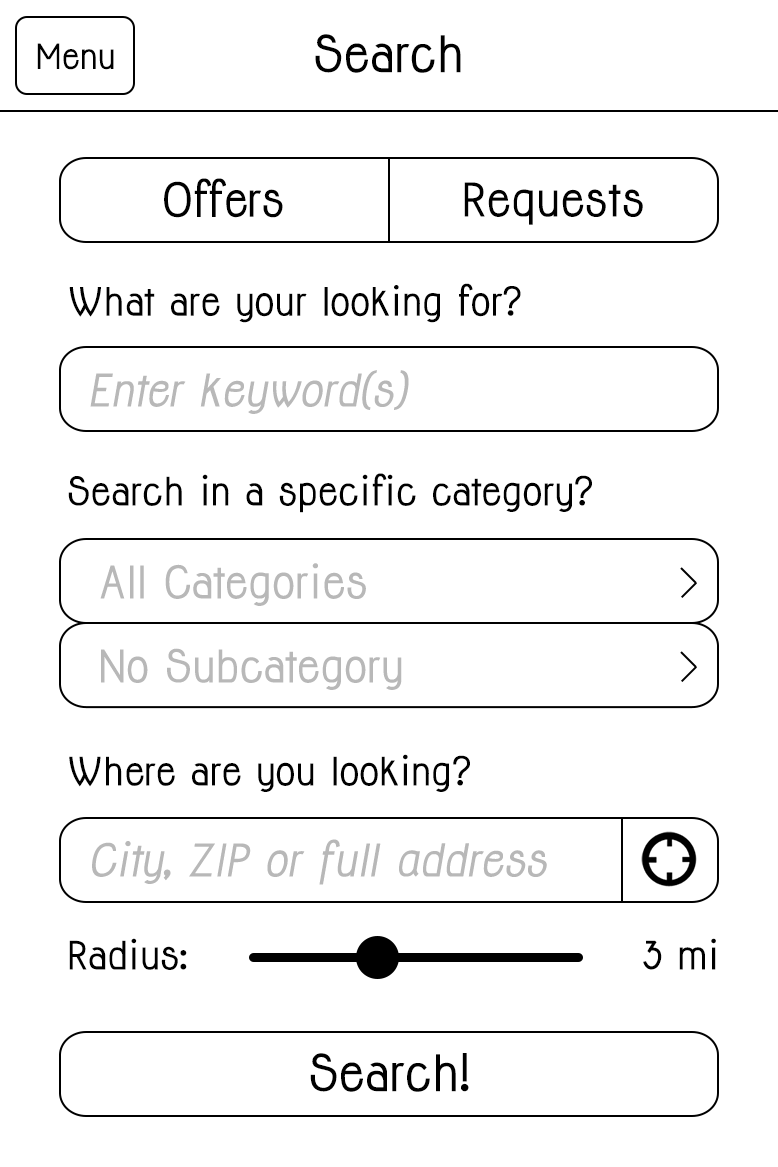
<style>
.page{position:relative;width:778px;height:1167px;background:#ffffff}
.page>*{position:absolute;margin:0}
.t1{font:46.2px "Jolly-Bold";color:#000000}
.t2{font:32px "Jolly-Bold";color:#000000}
.t3{font:43px "Jolly-Bold";color:#000000}
.t4{font:42.8px "Jolly-Bold";color:#000000}
.t5{font:36px "Jolly-Bold";color:#000000}
.t6{font:41.3px "Jolly-BoldItalic";color:#b8b8b8}
.t7{font:36.1px "Jolly-Bold";color:#000000}
.t8{font:41.3px "Jolly-Bold";color:#b8b8b8}
.t9{font:41.4px "Jolly-Bold";color:#b8b8b8}
.t10{font:41.4px "Jolly-BoldItalic";color:#b8b8b8}
</style>
<div class="page">
<p class="t1" style="left:315px;top:34px;width:146px;height:39px">Search</p>
<p class="t2" style="left:37px;top:43px;width:77px;height:27px">Menu</p>
<p class="t3" style="left:164px;top:178px;width:119px;height:40px">Offers</p>
<p class="t4" style="left:464px;top:182px;width:179px;height:43px">Requests</p>
<p class="t5" style="left:69px;top:283px;width:452px;height:40px">What are your looking for?</p>
<p class="t6" style="left:90px;top:370px;width:319px;height:44px">Enter keyword(s)</p>
<p class="t7" style="left:68px;top:473px;width:524px;height:40px">Search in a specific category?</p>
<p class="t8" style="left:100px;top:563px;width:266px;height:43px">All Categories</p>
<p class="t9" style="left:101px;top:648px;width:301px;height:42px">No Subcategory</p>
<p class="t7" style="left:69px;top:754px;width:401px;height:38px">Where are you looking?</p>
<p class="t10" style="left:92px;top:839px;width:455px;height:46px">City, ZIP or full address</p>
<p class="t7" style="left:69px;top:938px;width:118px;height:32px">Radius:</p>
<p class="t7" style="left:643px;top:938px;width:73px;height:32px">3 mi</p>
<p class="t1" style="left:310px;top:1053px;width:159px;height:39px">Search!</p>
</div>
